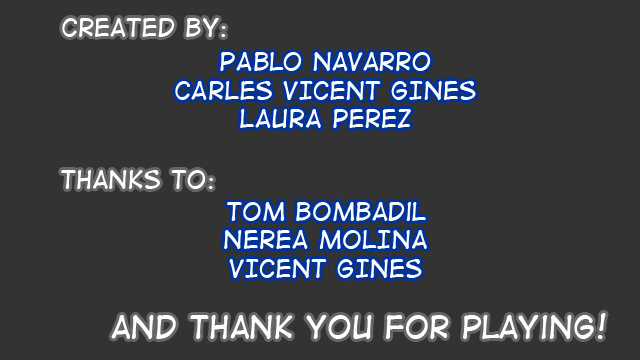
<style>
.page{position:relative;width:640px;height:360px;background:#333333}
.page>*{position:absolute;margin:0}
.t1{font:24px "DigitalStrip";color:#ffffff}
.t2{font:30px "DigitalStrip";color:#ffffff}
</style>
<div class="page">
<p class="t1" style="left:62px;top:18px;width:164px;height:19px">created by:</p>
<p class="t1" style="left:175px;top:52px;width:301px;height:76px;text-align:center">PAblo Navarro<br>cARLES VICENT GINES<br>LAURA PEREZ</p>
<p class="t1" style="left:61px;top:170px;width:152px;height:19px">thanks to:</p>
<p class="t1" style="left:224px;top:202px;width:203px;height:76px;text-align:center">Tom Bombadil<br>nEREA mOLINA<br>vICENT gINES</p>
<p class="t2" style="left:111px;top:313px;width:495px;height:26px">and thank you for playing!</p>
</div>
